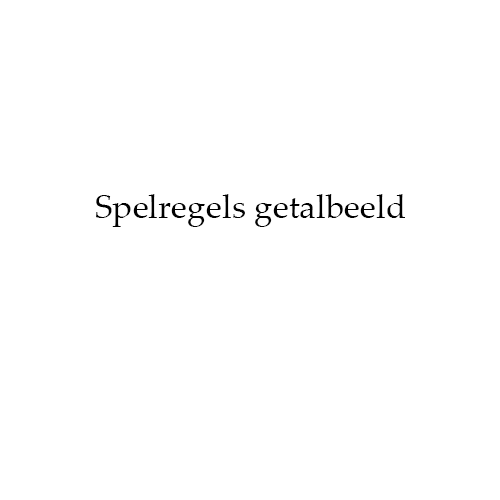
<style>
.page{position:relative;width:500px;height:500px;background:#ffffff}
.page>*{position:absolute;margin:0}
.t1{font:33.3px "PalatinoLinotype-Roman";color:#010101}
</style>
<div class="page">
<p class="t1" style="left:96px;top:194px;width:309px;height:33px">Spelregels getalbeeld</p>
</div>
